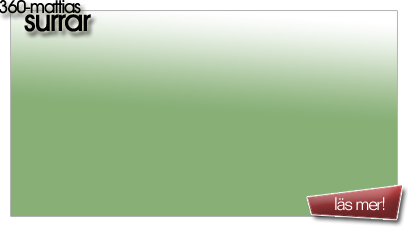
<style>
.page{position:relative;width:408px;height:227px;background:#87af76}
.page>*{position:absolute;margin:0}
.t1{font:18px/18px "AvantGardeITCbyBT-Medium";letter-spacing:-0.075em;color:#000000}
.t2{font:30px/18px "AvantGardeITCbyBT-Medium";letter-spacing:-0.075em;color:#000000;font-weight:bold}
.t3{font:18px "FolioBT-Light";letter-spacing:-0.075em;color:#ffffff}
</style>
<div class="page">
<p class="t1" style="left:0px;top:0px;width:91px;height:32px;text-align:center">360-mattias<br><span class="t2">            surrar</span></p>
<p class="t3" style="left:335px;top:197px;width:50px;height:14px">läs mer!</p>
</div>
